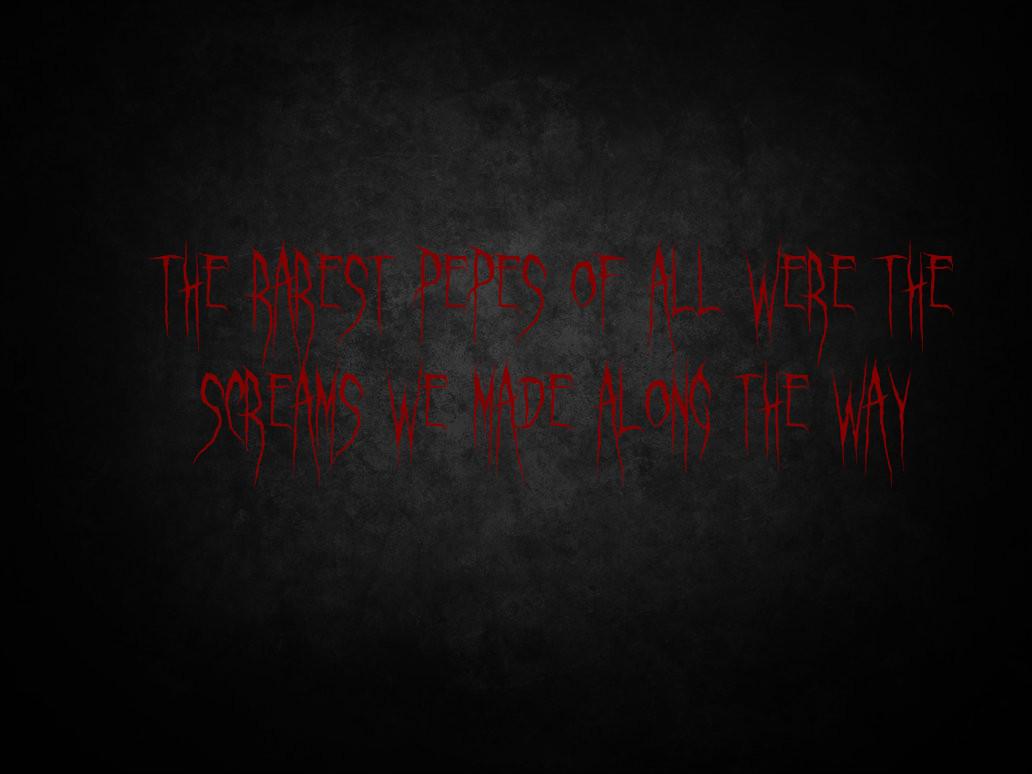
<style>
.page{position:relative;width:1032px;height:774px}
.page>*{position:absolute;margin:0}
.t1{font:99px "GhastlyPanic";color:#830000}
</style>
<div class="page">
<p class="t1" style="left:148px;top:236px;width:806px;height:251px;text-align:center">The rarest pepes of all were the         screams we made along the way</p>
</div>
